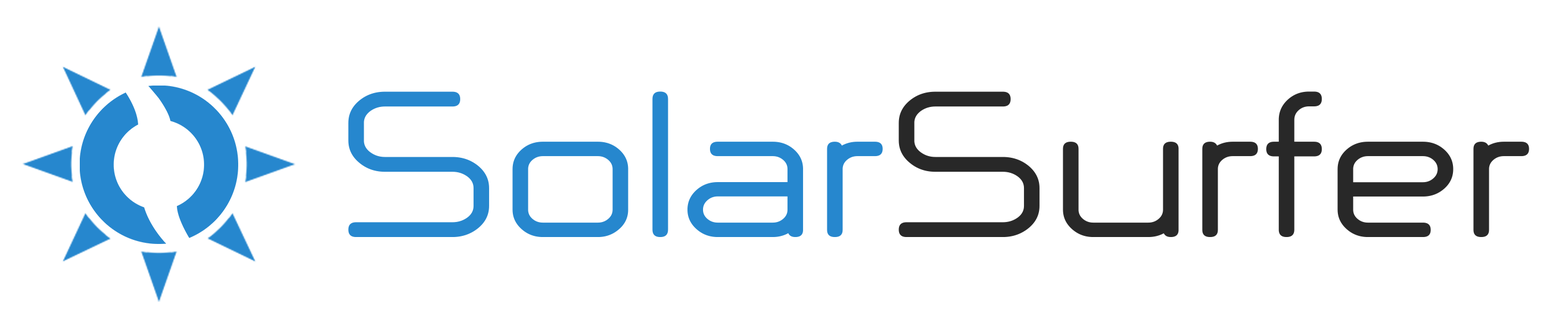
<style>
.page{position:relative;width:1568px;height:322px;background:#ffffff}
.page>*{position:absolute;margin:0}
.t1{font:256.2px "NPNaipolAllinOne-Bold";color:#282828}
.t2{font:256.2px "NPNaipolAllinOne-Bold";color:#2687ce}
</style>
<div class="page">
<p class="t1" style="left:348px;top:91px;width:1181px;height:146px"><span class="t2">Solar</span>Surfer</p>
</div>
